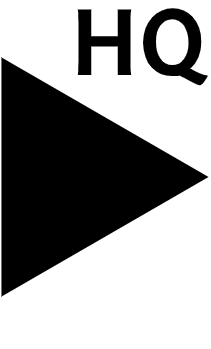
<style>
.page{position:relative;width:211px;height:349px;background:#ffffff}
.page>*{position:absolute;margin:0}
.t1{font:92px "AndikaNewBasic-Bold";color:#000000}
</style>
<div class="page">
<p class="t1" style="left:77px;top:8px;width:132px;height:78px">HQ</p>
</div>
